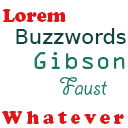
<style>
.page{position:relative;width:128px;height:128px;background:#ffffff}
.page>*{position:absolute;margin:0}
.t1{font:18.4px "CooperBlackStd";color:#dd1717}
.t2{font:21px "BitstreamVeraSans-Roman";color:#0d453c}
.t3{font:22px "OCRAStd";color:#177868}
.t4{font:28px "GiddyupStd";color:#177b6b}
.t5{font:18.4px "CooperBlackStd";letter-spacing:0.2em;color:#dd1717}
</style>
<div class="page">
<p class="t1" style="left:2px;top:9px;width:64px;height:13px">Lorem</p>
<p class="t2" style="left:16px;top:28px;width:110px;height:16px">Buzzwords</p>
<p class="t3" style="left:34px;top:52px;width:91px;height:17px">Gibson</p>
<p class="t4" style="left:60px;top:77px;width:48px;height:18px">Faust</p>
<p class="t5" style="left:2px;top:111px;width:122px;height:13px">Whatever</p>
</div>
